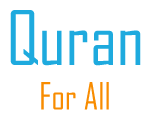
<style>
.page{position:relative;width:150px;height:119px;background:#ffffff}
.page>*{position:absolute;margin:0}
.t1{font:72px "AgencyFB-Reg";color:#1eaade}
.t2{font:36px "AgencyFB-Reg";color:#f88c00}
</style>
<div class="page">
<p class="t1" style="left:10px;top:10px;width:131px;height:56px">Quran</p>
<p class="t2" style="left:41px;top:82px;width:68px;height:28px">For All</p>
</div>
